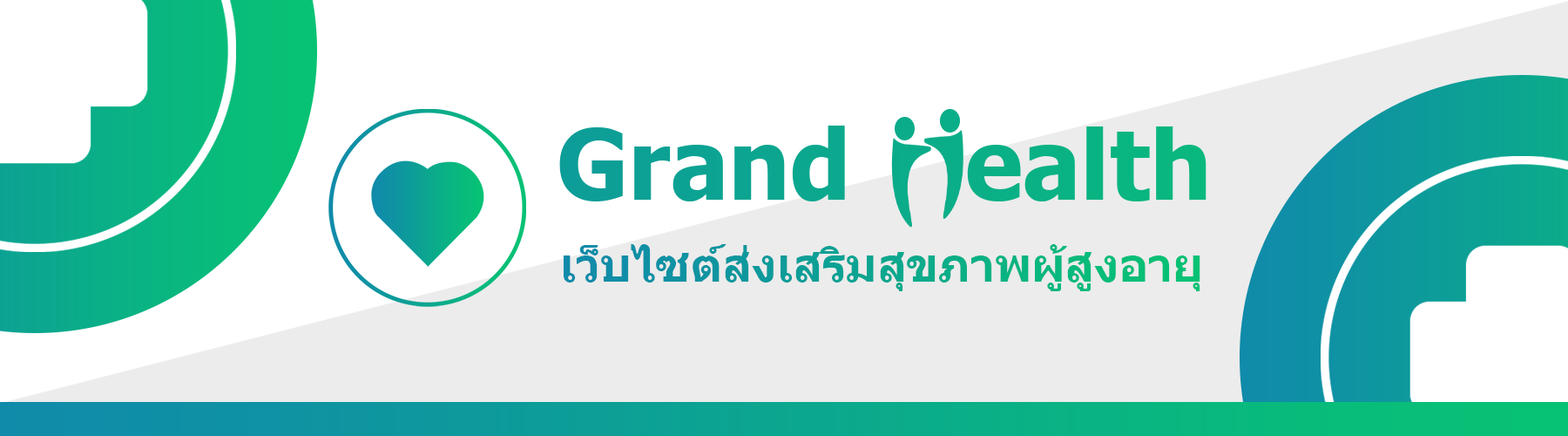
<style>
.page{position:relative;width:1568px;height:436px;background:#ffffff}
.page>*{position:absolute;margin:0}
.t1{font:96.8px "Tahoma-Bold";color:#0ba98d}
.t2{font:45.9px "Tahoma-Bold"}
</style>
<div class="page">
<p class="t1" style="left:559px;top:125px;width:647px;height:76px">Grand    ealth</p>
<p class="t2" style="left:564px;top:244px;width:636px;height:47px">เว็บไซต์ส่งเสริมสุขภาพผู้สูงอายุ</p>
</div>
